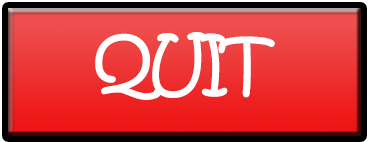
<style>
.page{position:relative;width:369px;height:142px}
.page>*{position:absolute;margin:0}
.t1{font:120px "KristenITC-Regular";letter-spacing:-0.1em;color:#ffffff}
.t2{font:20px "KristenITC-Regular";letter-spacing:-0.1em;color:#ffffff}
</style>
<div class="page">
<p class="t1" style="left:95px;top:32px;width:180px;height:68px"><span class="t2"><br><br><br><br><br><br><br><br></span>QUIT</p>
</div>
